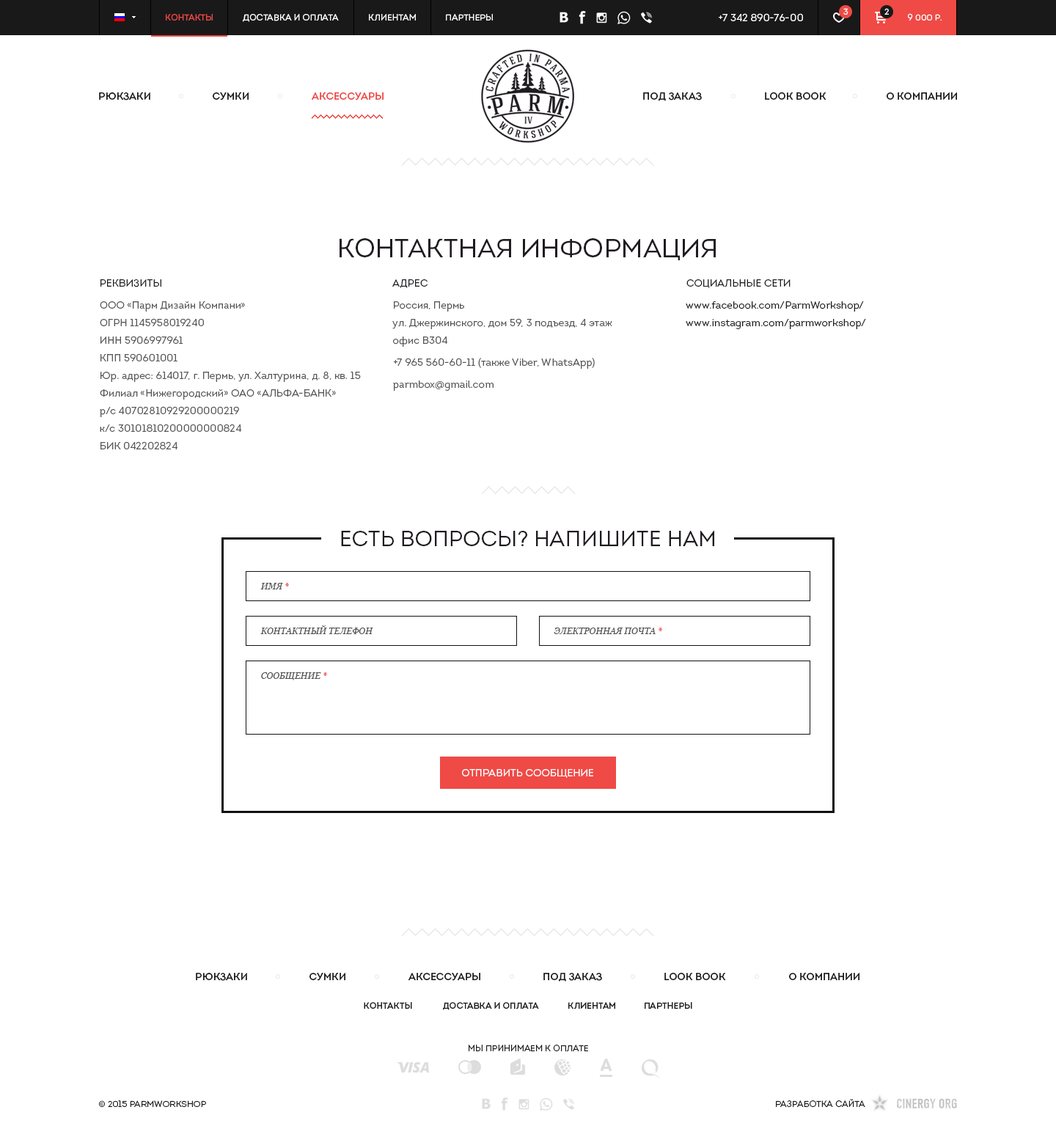
<style>
.page{position:relative;width:1056px;height:1129px;background:#ffffff}
.page>*{position:absolute;margin:0}
.t1{font:8.8px "Intro-Book";color:#ef4a46;text-transform:uppercase}
.t2{font:8.8px "Intro-Book";color:#ffffff;text-transform:uppercase}
.t3{font:10.3px "Intro-Book";color:#ffffff;text-transform:uppercase}
.t4{font:8.8px "Intro-Book";letter-spacing:0.1em;color:#ffffff;text-transform:uppercase}
.t5{font:10.3px "Intro-Regular";color:#1f1b20;text-transform:uppercase}
.t6{font:10.3px "Intro-Regular";color:#ef4a46;text-transform:uppercase}
.t7{font:26.4px "Intro-Book";color:#1f1b20;text-transform:uppercase}
.t8{font:10.3px "Intro-Book";color:#1f1b20;text-transform:uppercase}
.t9{font:10.3px/17.6px "Intro-Book";color:#555555}
.t10{font:10.3px/22px "Intro-Book";color:#555555}
.t11{font:10.3px/17.6px "Intro-Book";color:#1f1b20}
.t12{font:22px "Intro-Book";color:#1f1b20;text-transform:uppercase}
.t13{font:8.8px "Georgia-Italic";color:#555555;text-transform:uppercase}
.t14{font:8.8px "Georgia-Italic";color:#ef4a46;text-transform:uppercase}
.t15{font:8.8px "Intro-Regular";color:#1f1b20;text-transform:uppercase}
.t16{font:8.8px "Intro-Book";color:#1f1b20;text-transform:uppercase}
</style>
<div class="page">
<p class="t1" style="left:166px;top:14px;width:47px;height:7px">Контакты</p>
<p class="t2" style="left:243px;top:14px;width:96px;height:8px">Доставка и оплата</p>
<p class="t2" style="left:369px;top:14px;width:47px;height:7px">Клиентам</p>
<p class="t2" style="left:446px;top:14px;width:47px;height:7px">Партнеры</p>
<p class="t3" style="left:719px;top:13px;width:84px;height:8px">+7 342 890-76-00</p>
<p class="t4" style="left:843px;top:8px;width:5px;height:7px">3</p>
<p class="t4" style="left:884px;top:8px;width:5px;height:7px">2</p>
<p class="t2" style="left:908px;top:13px;width:34px;height:8px">9 000 р.</p>
<p class="t5" style="left:99px;top:92px;width:51px;height:8px">Рюкзаки</p>
<p class="t5" style="left:213px;top:92px;width:36px;height:8px">Сумки</p>
<p class="t6" style="left:311px;top:92px;width:73px;height:8px">Аксессуары</p>
<p class="t5" style="left:643px;top:92px;width:59px;height:9px">Под заказ</p>
<p class="t5" style="left:765px;top:92px;width:61px;height:8px">Look Book</p>
<p class="t5" style="left:887px;top:92px;width:70px;height:8px">о Компании</p>
<p class="t7" style="left:340px;top:238px;width:376px;height:22px">Контактная информация</p>
<p class="t8" style="left:100px;top:279px;width:61px;height:8px">Реквизиты</p>
<p class="t8" style="left:392px;top:279px;width:36px;height:9px">Адрес</p>
<p class="t8" style="left:686px;top:279px;width:104px;height:9px">Социальные сети</p>
<p class="t9" style="left:100px;top:301px;width:261px;height:149px">ООО «Парм Дизайн Компани» <br>ОГРН 1145958019240 <br>ИНН 5906997961 <br>КПП 590601001 <br>Юр. адрес: 614017, г. Пермь, ул. Халтурина, д. 8, кв. 15 <br>Филиал «Нижегородский» ОАО «АЛЬФА-БАНК» <br>р/с 40702810929200000219 <br>к/с 30101810200000000824 <br>БИК 042202824</p>
<p class="t9" style="left:392px;top:301px;width:220px;height:90px">Россия, Пермь<br>ул. Джержинского, дом 59, 3 подъезд, 4 этаж<br>офис В304<br><span class="t10">+7 965 560-60-11 (также Viber, WhatsApp)<br>parmbox@gmail.com</span></p>
<p class="t11" style="left:686px;top:301px;width:180px;height:28px">www.facebook.com/ParmWorkshop/<br>www.instagram.com/parmworkshop/</p>
<p class="t12" style="left:341px;top:531px;width:373px;height:15px">Есть вопросы? Напишите нам</p>
<p class="t13" style="left:260px;top:583px;width:29px;height:7px">Имя <span class="t14">*</span></p>
<p class="t13" style="left:260px;top:625px;width:113px;height:9px">Контактный телефон</p>
<p class="t13" style="left:554px;top:628px;width:108px;height:6px">Электронная почта <span class="t14">*</span></p>
<p class="t13" style="left:261px;top:672px;width:66px;height:8px">Сообщение <span class="t14">*</span></p>
<p class="t3" style="left:462px;top:769px;width:131px;height:9px">Отправить сообщение</p>
<p class="t5" style="left:196px;top:972px;width:51px;height:9px">Рюкзаки</p>
<p class="t5" style="left:309px;top:972px;width:36px;height:9px">Сумки</p>
<p class="t5" style="left:408px;top:972px;width:72px;height:9px">Аксессуары</p>
<p class="t5" style="left:543px;top:972px;width:59px;height:10px">Под заказ</p>
<p class="t5" style="left:664px;top:972px;width:62px;height:8px">Look Book</p>
<p class="t5" style="left:789px;top:972px;width:70px;height:8px">О компании</p>
<p class="t15" style="left:364px;top:1002px;width:48px;height:7px">Контакты</p>
<p class="t15" style="left:443px;top:1002px;width:96px;height:8px">Доставка и оплата</p>
<p class="t15" style="left:568px;top:1002px;width:47px;height:7px">Клиентам</p>
<p class="t15" style="left:645px;top:1002px;width:47px;height:7px">Партнеры</p>
<p class="t16" style="left:469px;top:1045px;width:119px;height:7px">Мы принимаем к оплате</p>
<p class="t16" style="left:99px;top:1101px;width:107px;height:6px">© 2015 ParmWorkShop</p>
<p class="t16" style="left:776px;top:1099px;width:89px;height:8px">Разработка сайта</p>
</div>
